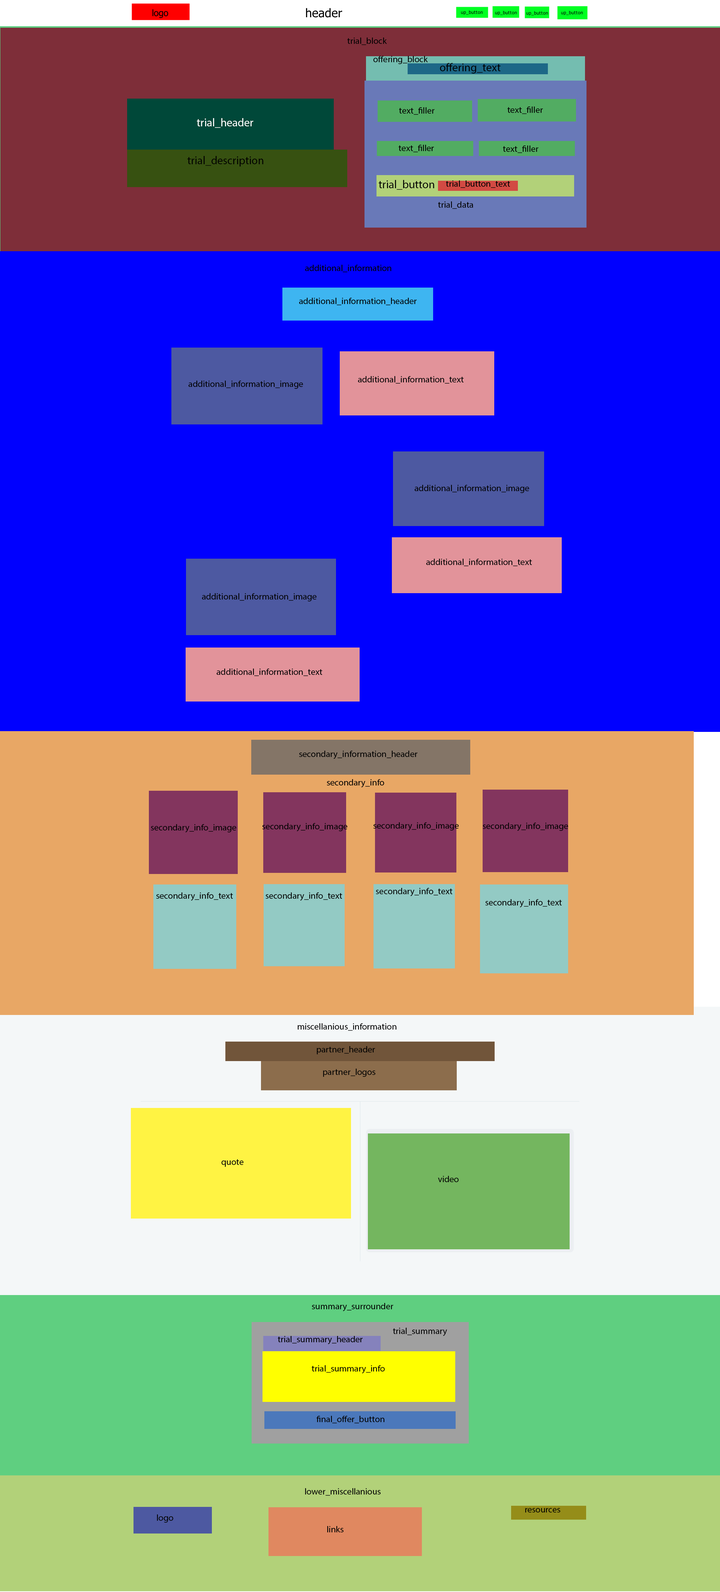
<style>
.page{position:relative;width:720px;height:1592px;background:#0000ff}
.page>*{position:absolute;margin:0}
.t1{font:9px "MyriadPro-Regular";color:#000000}
.t2{font:11.2px "MyriadPro-Regular";color:#000000}
.t3{font:11.2px "MyriadPro-Regular";color:#ffffff}
</style>
<div class="page">
<p class="t1" style="left:347px;top:37px;width:40px;height:8px">trial_block</p>
<p class="t1" style="left:373px;top:56px;width:55px;height:8px">offering_block</p>
<p class="t2" style="left:440px;top:63px;width:61px;height:10px">offering_text</p>
<p class="t1" style="left:399px;top:107px;width:36px;height:8px">text_filler</p>
<p class="t1" style="left:507px;top:106px;width:36px;height:8px">text_filler</p>
<p class="t3" style="left:197px;top:118px;width:56px;height:10px">trial_header</p>
<p class="t1" style="left:398px;top:145px;width:36px;height:7px">text_filler</p>
<p class="t1" style="left:503px;top:145px;width:35px;height:8px">text_filler</p>
<p class="t2" style="left:187px;top:156px;width:76px;height:10px">trial_description</p>
<p class="t2" style="left:379px;top:180px;width:55px;height:10px">trial_button</p>
<p class="t1" style="left:446px;top:180px;width:64px;height:8px">trial_button_text</p>
<p class="t1" style="left:438px;top:201px;width:35px;height:8px">trial_data</p>
<p class="t1" style="left:305px;top:265px;width:86px;height:7px">additional_information</p>
<p class="t1" style="left:299px;top:298px;width:118px;height:7px">additional_information_header</p>
<p class="t1" style="left:358px;top:376px;width:106px;height:8px">additional_information_text</p>
<p class="t1" style="left:188px;top:381px;width:115px;height:8px">additional_information_image</p>
<p class="t1" style="left:414px;top:485px;width:115px;height:8px">additional_information_image</p>
<p class="t1" style="left:426px;top:559px;width:106px;height:7px">additional_information_text</p>
<p class="t1" style="left:202px;top:593px;width:114px;height:8px">additional_information_image</p>
<p class="t1" style="left:216px;top:669px;width:106px;height:7px">additional_information_text</p>
<p class="t1" style="left:299px;top:751px;width:118px;height:8px">secondary_information_header</p>
<p class="t1" style="left:327px;top:779px;width:57px;height:8px">secondary_info</p>
<p class="t1" style="left:151px;top:824px;width:85px;height:8px">secondary_info_image</p>
<p class="t1" style="left:262px;top:823px;width:86px;height:8px">secondary_info_image</p>
<p class="t1" style="left:373px;top:822px;width:86px;height:9px">secondary_info_image</p>
<p class="t1" style="left:483px;top:823px;width:85px;height:8px">secondary_info_image</p>
<p class="t1" style="left:156px;top:892px;width:77px;height:9px">secondary_info_text</p>
<p class="t1" style="left:265px;top:892px;width:77px;height:9px">secondary_info_text</p>
<p class="t1" style="left:376px;top:888px;width:77px;height:8px">secondary_info_text</p>
<p class="t1" style="left:485px;top:899px;width:77px;height:8px">secondary_info_text</p>
<p class="t1" style="left:298px;top:1023px;width:98px;height:8px">miscellanious_information</p>
<p class="t1" style="left:317px;top:1046px;width:58px;height:8px">partner_header</p>
<p class="t1" style="left:323px;top:1069px;width:52px;height:8px">partner_logos</p>
<p class="t1" style="left:221px;top:1159px;width:23px;height:8px">quote</p>
<p class="t1" style="left:438px;top:1176px;width:21px;height:6px">video</p>
<p class="t1" style="left:312px;top:1303px;width:81px;height:8px">summary_surrounder</p>
<p class="t1" style="left:277px;top:1336px;width:86px;height:8px">trial_summary_header</p>
<p class="t1" style="left:393px;top:1328px;width:54px;height:8px">trial_summary</p>
<p class="t1" style="left:312px;top:1365px;width:73px;height:8px">trial_summary_info</p>
<p class="t1" style="left:316px;top:1416px;width:68px;height:7px">final_offer_button</p>
<p class="t1" style="left:305px;top:1488px;width:76px;height:8px">lower_miscellanious</p>
<p class="t1" style="left:157px;top:1514px;width:16px;height:9px">logo</p>
<p class="t1" style="left:525px;top:1508px;width:35px;height:5px">resources</p>
<p class="t1" style="left:327px;top:1526px;width:16px;height:6px">links</p>
</div>
